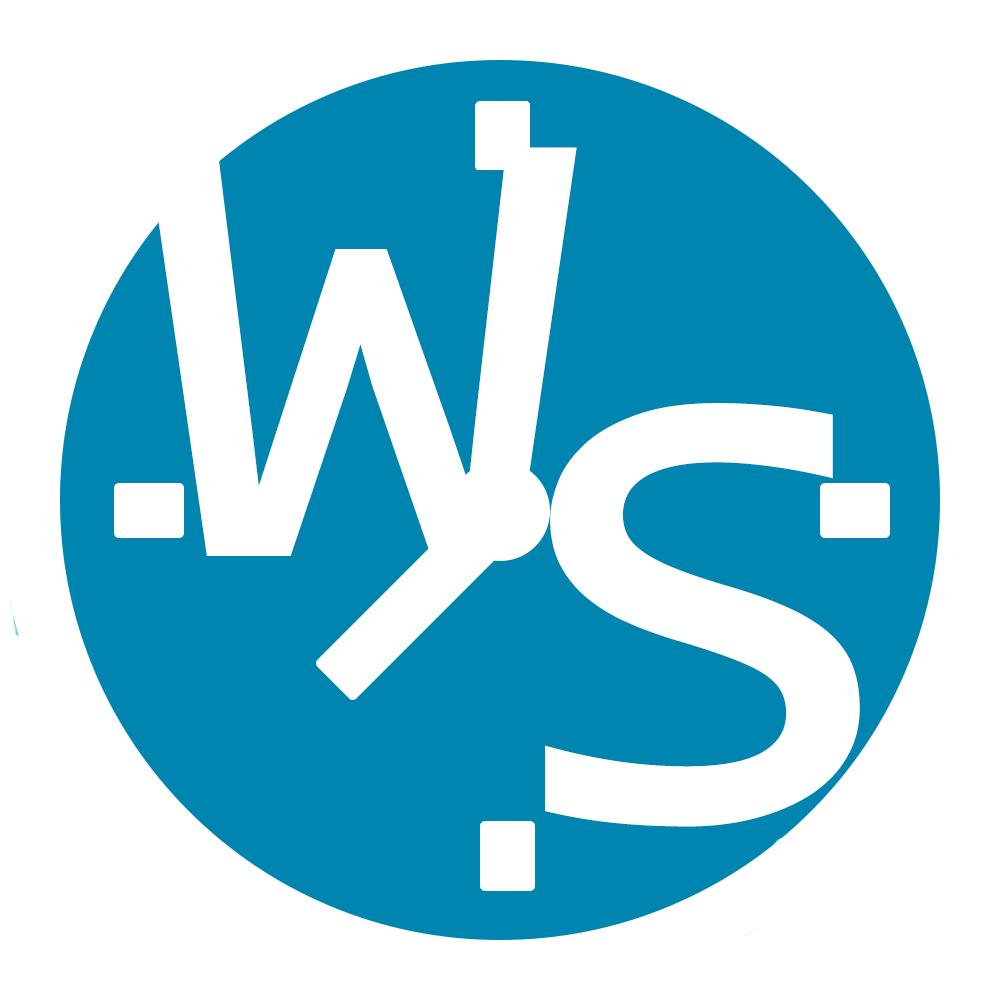
<style>
.page{position:relative;width:1000px;height:1000px;background:#ffffff}
.page>*{position:absolute;margin:0}
.t1{font:833.3px "Consolas";color:#ffffff}
.t2{font:833.3px "Consolas";color:#feffff}
</style>
<div class="page">
<p class="t1" style="left:148px;top:147px;width:429px;height:409px">w</p>
<p class="t2" style="left:545px;top:403px;width:315px;height:424px">s</p>
</div>
